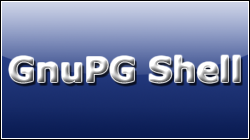
<style>
.page{position:relative;width:250px;height:140px}
.page>*{position:absolute;margin:0}
.t1{font:34px "Verdana-Bold"}
</style>
<div class="page">
<p class="t1" style="left:9px;top:55px;width:231px;height:28px">GnuPG Shell</p>
</div>
